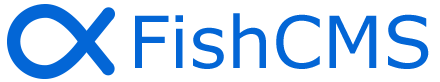
<style>
.page{position:relative;width:440px;height:82px;background:#ffffff}
.page>*{position:absolute;margin:0}
.t1{font:72px "Verdana";color:#0366d6}
</style>
<div class="page">
<p class="t1" style="left:135px;top:13px;width:294px;height:56px">FishCMS</p>
</div>
